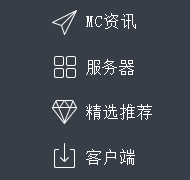
<style>
.page{position:relative;width:190px;height:180px;background:#373e48}
.page>*{position:absolute;margin:0}
.t1{font:16px "NSimSun";letter-spacing:0.05em;color:#ffffff}
</style>
<div class="page">
<p class="t1" style="left:86px;top:13px;width:50px;height:16px">MC资讯</p>
<p class="t1" style="left:86px;top:59px;width:48px;height:16px">服务器</p>
<p class="t1" style="left:86px;top:104px;width:66px;height:16px">精选推荐</p>
<p class="t1" style="left:86px;top:149px;width:49px;height:16px">客户端</p>
</div>
